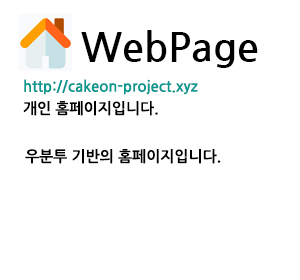
<style>
.page{position:relative;width:300px;height:280px;background:#ffffff}
.page>*{position:absolute;margin:0}
.t1{font:40px "NanumGothicBold";color:#000000}
.t2{font:15px "NanumGothicBold";color:#0a978f}
.t3{font:15px "NanumGothicBold";color:#000000}
</style>
<div class="page">
<p class="t1" style="left:81px;top:30px;width:177px;height:38px">WebPage</p>
<p class="t2" style="left:24px;top:79px;width:174px;height:16px">http://cakeon-project.xyz</p>
<p class="t3" style="left:23px;top:101px;width:135px;height:15px">개인 홈페이지입니다.</p>
<p class="t3" style="left:25px;top:149px;width:196px;height:15px">우분투 기반의 홈페이지입니다.</p>
</div>
